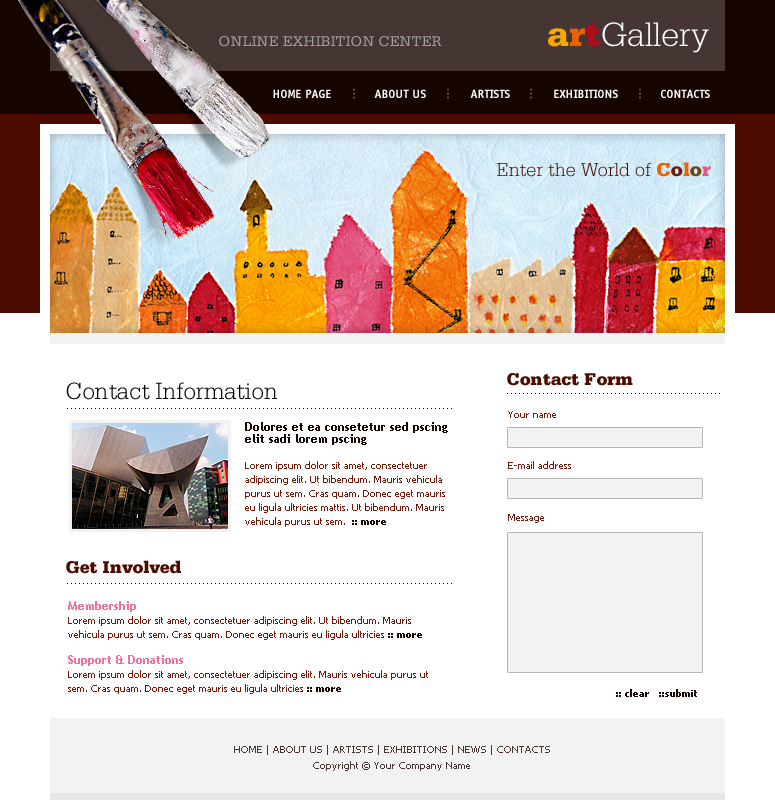
<style>
.page{position:relative;width:775px;height:800px;background:#ffffff}
.page>*{position:absolute;margin:0}
.t1{font:36px "SerifaStd-Light";color:#ffffff}
.t2{font:36px "SerifaStd-Black";color:#faa701}
.t3{font:36px "SerifaStd-Black";color:#ea6303}
.t4{font:36px "SerifaStd-Black";color:#b10c1b}
.t5{font:15px "SerifaStd-Roman";color:#a29b99;text-transform:uppercase}
.t6{font:12px "OffensiveBoldBold";color:#ffffff}
.t7{font:12px "OffensiveBoldBold";color:#5c504d}
.t8{font:19.9px "SerifaStd-Light";color:#4e0c00}
.t9{font:19.9px "SerifaStd-Black";color:#ea6303}
.t10{font:19.9px "SerifaStd-Black";color:#741907}
.t11{font:19.9px "SerifaStd-Black";color:#6d470f}
.t12{font:19.9px "SerifaStd-Black";color:#e75884}
.t13{font:18px "SerifaStd-Black";color:#4e0c00}
.t14{font:24.7px "SerifaStd-Light";color:#000000}
.t15{font:10px "TrebuchetMS-Bold";color:#000000}
.t16{font:10px "Tahoma";color:#741907}
.t17{font:10px/14px "Tahoma";color:#741907}
.t18{font:12px/12px "TrebuchetMS-Bold";color:#160400}
.t19{font:10px/14px "Tahoma-Bold";color:#160400}
.t20{font:12px/12px "TrebuchetMS-Bold";color:#f1719a}
.t21{font:10px "Tahoma-Bold";color:#160400}
.t22{font:10px/16px "Tahoma";color:#453633}
</style>
<div class="page">
<p class="t1" style="left:548px;top:22px;width:161px;height:31px"><span class="t2">a</span><span class="t3">r</span><span class="t4">t</span>Gallery</p>
<p class="t5" style="left:219px;top:36px;width:223px;height:11px">online exhibition center</p>
<p class="t6" style="left:273px;top:89px;width:58px;height:9px">HOME PAGE</p>
<p class="t7" style="left:353px;top:88px;width:2px;height:11px;rotate:90deg">...</p>
<p class="t6" style="left:374px;top:89px;width:52px;height:9px">ABOUT US</p>
<p class="t7" style="left:447px;top:88px;width:2px;height:11px;rotate:90deg">...</p>
<p class="t6" style="left:470px;top:89px;width:40px;height:9px">ARTISTS</p>
<p class="t7" style="left:530px;top:88px;width:2px;height:11px;rotate:90deg">...</p>
<p class="t6" style="left:554px;top:89px;width:64px;height:9px">EXHIBITIONS</p>
<p class="t7" style="left:639px;top:88px;width:2px;height:11px;rotate:90deg">...</p>
<p class="t6" style="left:661px;top:89px;width:49px;height:9px">CONTACTS</p>
<p class="t8" style="left:497px;top:162px;width:214px;height:15px">Enter the World of <span class="t9">C</span><span class="t10">o</span><span class="t9">l</span><span class="t11">o</span><span class="t12">r</span></p>
<p class="t13" style="left:507px;top:373px;width:126px;height:13px">Contact Form</p>
<p class="t14" style="left:66px;top:382px;width:211px;height:18px">Contact Information</p>
<p class="t15" style="left:507px;top:393px;width:213px;height:1px">......................................................</p>
<p class="t15" style="left:67px;top:408px;width:385px;height:1px">.................................................................................................</p>
<p class="t16" style="left:508px;top:411px;width:48px;height:7px">Your name</p>
<p class="t17" style="left:245px;top:422px;width:203px;height:105px"><span class="t18">Dolores et ea consetetur sed pscing elit sadi lorem pscing <br><br></span>Lorem ipsum dolor sit amet, consectetuer adipiscing elit. Ut bibendum. Mauris vehicula purus ut sem. Cras quam. Donec eget mauris eu ligula ultricies mattis. Ut bibendum. Mauris vehicula purus ut sem.  <span class="t19">:: more</span></p>
<p class="t16" style="left:508px;top:461px;width:63px;height:8px">E-mail address</p>
<p class="t16" style="left:508px;top:514px;width:36px;height:9px">Message</p>
<p class="t13" style="left:66px;top:560px;width:115px;height:14px">Get Involved</p>
<p class="t15" style="left:67px;top:583px;width:385px;height:1px">.................................................................................................</p>
<p class="t17" style="left:68px;top:601px;width:360px;height:93px"><span class="t20">Membership<br></span>Lorem ipsum dolor sit amet, consectetuer adipiscing elit. Ut bibendum. Mauris vehicula purus ut sem. Cras quam. Donec eget mauris eu ligula ultricies <span class="t19">:: more<br><br></span><span class="t20">Support &amp; Donations<br></span>Lorem ipsum dolor sit amet, consectetuer adipiscing elit. Mauris vehicula purus ut sem. Cras quam. Donec eget mauris eu ligula ultricies <span class="t19">:: more</span></p>
<p class="t21" style="left:616px;top:689px;width:81px;height:8px">:: clear   ::submit</p>
<p class="t22" style="left:234px;top:745px;width:316px;height:26px;text-align:center">HOME | ABOUT US | ARTISTS | EXHIBITIONS | NEWS | CONTACTS<br>Copyright © Your Company Name</p>
</div>
